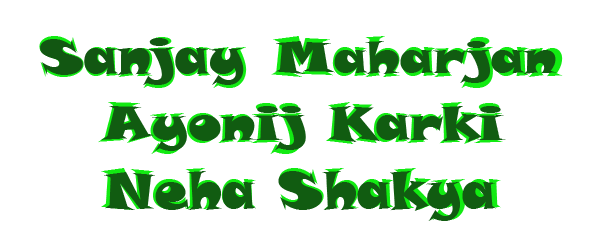
<style>
.page{position:relative;width:600px;height:250px;background:#ffffff}
.page>*{position:absolute;margin:0}
.t1{font:55px "SnapITC-Regular";color:#12eb12}
.t2{font:49.8px "SnapITC-Regular";color:#125712;scale:1.09 1}
.t3{font:48px "SnapITC-Regular";color:#125712;scale:1.09 1}
.t4{font:44.4px "SnapITC-Regular";color:#115c11;scale:1.2 1}
.t5{font:47.1px "SnapITC-Regular";color:#115c11;scale:1.17 1}
.t6{font:51.5px "SnapITC-Regular";color:#115c11;scale:1.04 1}
</style>
<div class="page">
<p class="t1" style="left:39px;top:36px;width:524px;height:184px;text-align:center">Sanjay Maharjan<br>Ayonij Karki<br>Neha Shakya</p>
<p class="t2" style="left:40px;top:38px;width:204px;height:47px"><span class="t3">S</span>anjay</p>
<p class="t4" style="left:275px;top:41px;width:281px;height:42px">Maharjan</p>
<p class="t5" style="left:101px;top:106px;width:405px;height:45px">Ayonij Karki</p>
<p class="t6" style="left:104px;top:171px;width:392px;height:50px">Neha Shakya</p>
</div>
